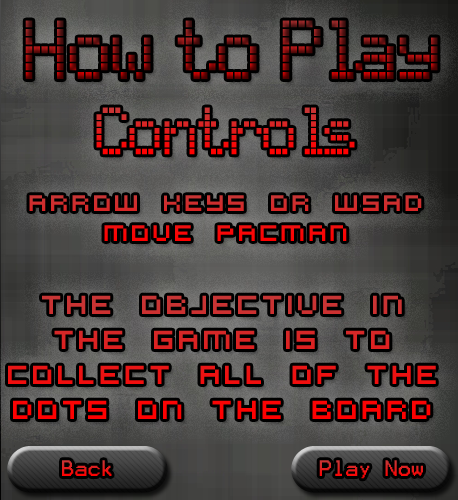
<style>
.page{position:relative;width:458px;height:500px}
.page>*{position:absolute;margin:0}
.t1{font:78.1px "TexasLED";letter-spacing:-0.02em}
.t2{font:62.5px "TexasLED";letter-spacing:-0.02em;color:#eb1313}
.t3{font:25px "VirtualDJ";letter-spacing:-0.02em}
.t4{font:29.2px "VirtualDJ";letter-spacing:-0.02em}
.t5{font:18px "Terminal";letter-spacing:-0.02em;color:#e81616}
.t6{font:18px "Terminal";letter-spacing:-0.02em;color:#e31a1a}
</style>
<div class="page">
<p class="t1" style="left:25px;top:20px;width:413px;height:59px">How to Play</p>
<p class="t2" style="left:96px;top:107px;width:259px;height:48px">Controls</p>
<p class="t3" style="left:29px;top:195px;width:393px;height:46px;text-align:center">Arrow Keys or WSAD <br>Move Pacman</p>
<p class="t4" style="left:8px;top:295px;width:428px;height:124px;text-align:center">The Objective in the game is to<br>collect all of the <br>dots on the board</p>
<p class="t5" style="left:62px;top:460px;width:50px;height:16px">Back</p>
<p class="t6" style="left:319px;top:460px;width:104px;height:19px">Play Now</p>
</div>
